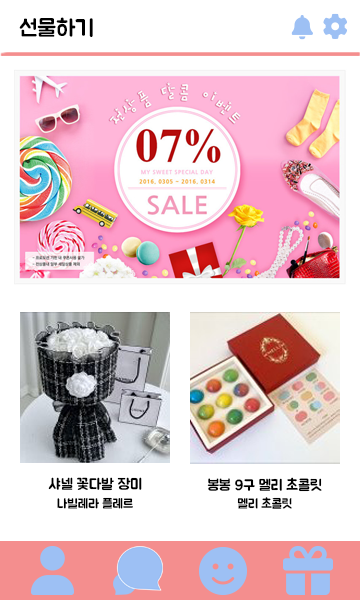
<style>
.page{position:relative;width:360px;height:600px;background:#ffffff}
.page>*{position:absolute;margin:0}
.t1{font:23px "BMJUA";color:#000000}
.t2{font:15px "BMJUA";color:#000000}
.t3{font:13px "BMJUA";color:#000000}
</style>
<div class="page">
<p class="t1" style="left:19px;top:17px;width:74px;height:20px">선물하기</p>
<p class="t2" style="left:48px;top:477px;width:94px;height:14px">샤넬 꽃다발 장미</p>
<p class="t2" style="left:207px;top:477px;width:115px;height:15px">봉봉 9구 멜리 초콜릿</p>
<p class="t3" style="left:57px;top:497px;width:76px;height:12px">나빌레라 플레르</p>
<p class="t3" style="left:237px;top:497px;width:55px;height:12px">멜리 초콜릿</p>
</div>
